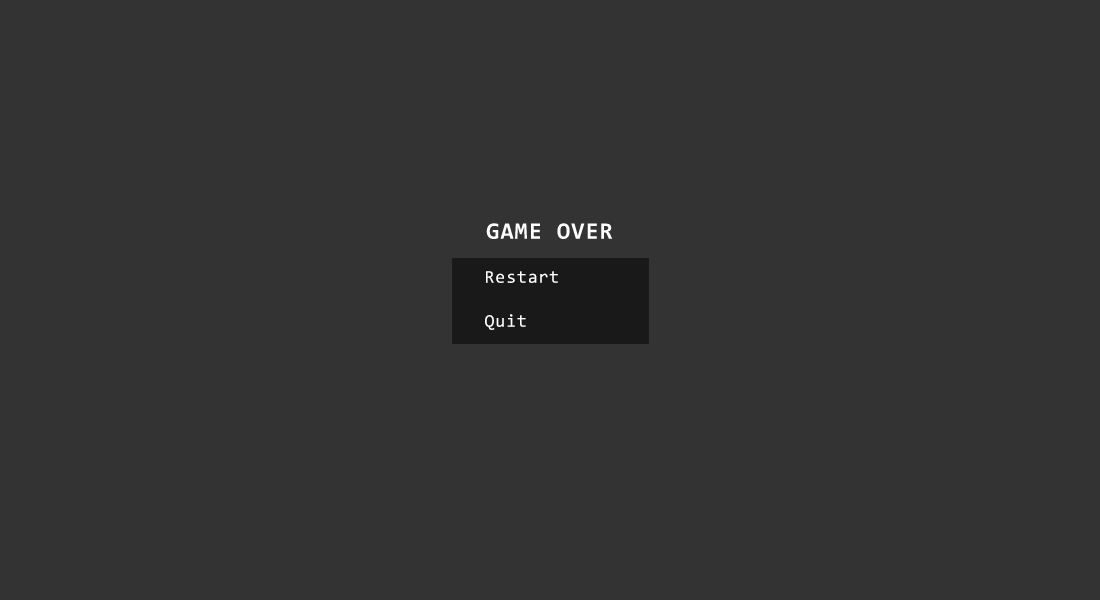
<style>
.page{position:relative;width:1100px;height:600px;background:#333333}
.page>*{position:absolute;margin:0}
.t1{font:23.7px "Consolas-Bold";letter-spacing:0.05em;color:#ffffff}
.t2{font:18px/44px "Consolas";letter-spacing:0.05em;color:#ffffff}
</style>
<div class="page">
<p class="t1" style="left:486px;top:223px;width:127px;height:16px">GAME OVER</p>
<p class="t2" style="left:485px;top:271px;width:73px;height:59px">Restart<br>Quit</p>
</div>
